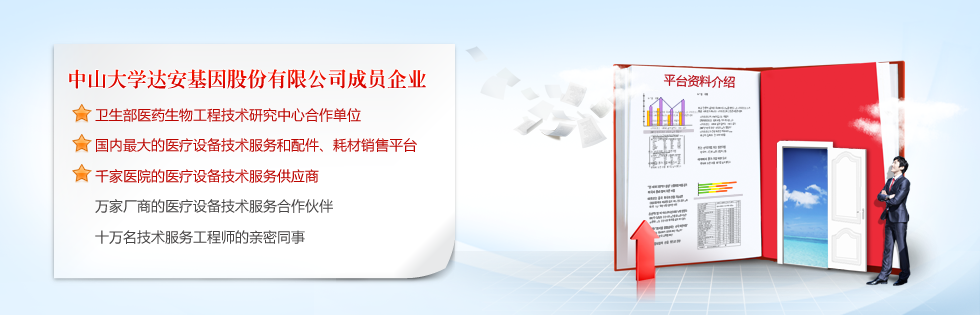
<style>
.page{position:relative;width:980px;height:315px}
.page>*{position:absolute;margin:0}
.t1{font:20px "GBInnMing-Heavy";color:#e40c00}
.t2{font:12px "MicrosoftYaHei";color:#b60d16;text-transform:uppercase}
.t3{font:14px "MicrosoftYaHei";color:#bb0500}
.t4{font:14px "MicrosoftYaHei";color:#484646}
</style>
<div class="page">
<p class="t1" style="left:69px;top:69px;width:357px;height:20px">中山大学达安基因股份有限公司成员企业</p>
<p class="t2" style="left:663px;top:74px;width:72px;height:14px;rotate:2deg">平台资料介绍</p>
<p class="t3" style="left:95px;top:108px;width:266px;height:14px">卫生部医药生物工程技术研究中心合作单位</p>
<p class="t3" style="left:96px;top:138px;width:321px;height:14px">国内最大的医疗设备技术服务和配件、耗材销售平台</p>
<p class="t3" style="left:95px;top:169px;width:224px;height:14px">千家医院的医疗设备技术服务供应商</p>
<p class="t4" style="left:95px;top:199px;width:238px;height:14px">万家厂商的医疗设备技术服务合作伙伴</p>
<p class="t4" style="left:95px;top:230px;width:210px;height:14px">十万名技术服务工程师的亲密同事</p>
</div>
